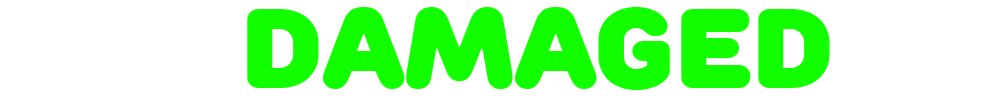
<style>
.page{position:relative;width:1000px;height:100px;background:#ffffff}
.page>*{position:absolute;margin:0}
.t1{font:113px "RoundsBlack";color:#12ff00}
</style>
<div class="page">
<p class="t1" style="left:247px;top:7px;width:583px;height:83px">damaged</p>
</div>
